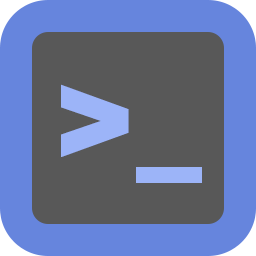
<style>
.page{position:relative;width:256px;height:256px;background:#585858}
.page>*{position:absolute;margin:0}
.t1{font:131.6px "MontserratRoman-Black";color:#9cb4f8}
</style>
<div class="page">
<p class="t1" style="left:61px;top:84px;width:141px;height:99px">&gt;_</p>
</div>
